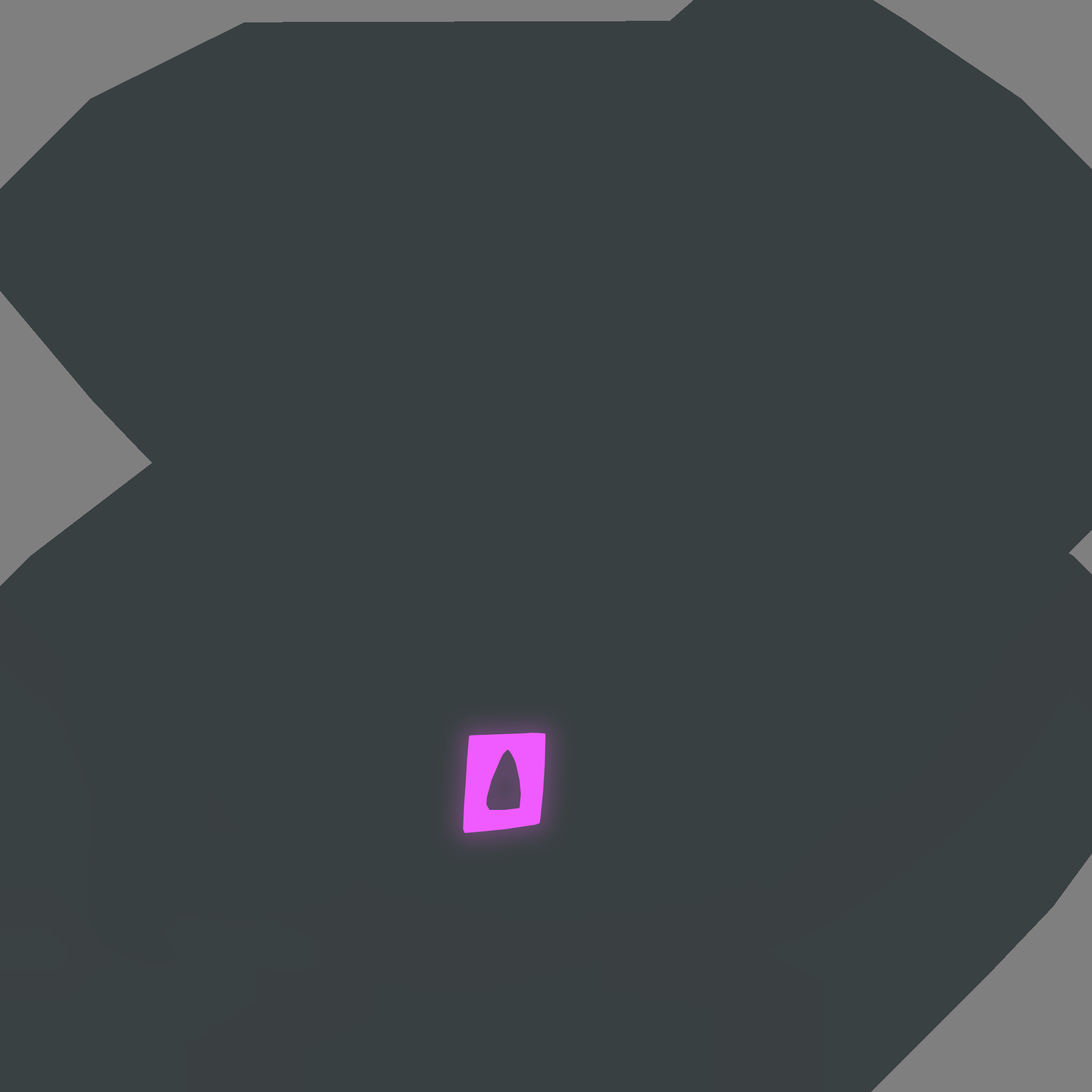
<style>
.page{position:relative;width:1092px;height:1092px;background:#394042}
.page>*{position:absolute;margin:0}
.t1{font:160px "Tarzan";color:#ef5bff}
</style>
<div class="page">
<p class="t1" style="left:463px;top:733px;width:83px;height:100px">0</p>
</div>
